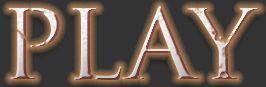
<style>
.page{position:relative;width:266px;height:87px;background:#333333}
.page>*{position:absolute;margin:0}
.t1{font:112px "TrajanPro-Regular"}
</style>
<div class="page">
<p class="t1" style="left:8px;top:6px;width:252px;height:74px">play</p>
</div>
